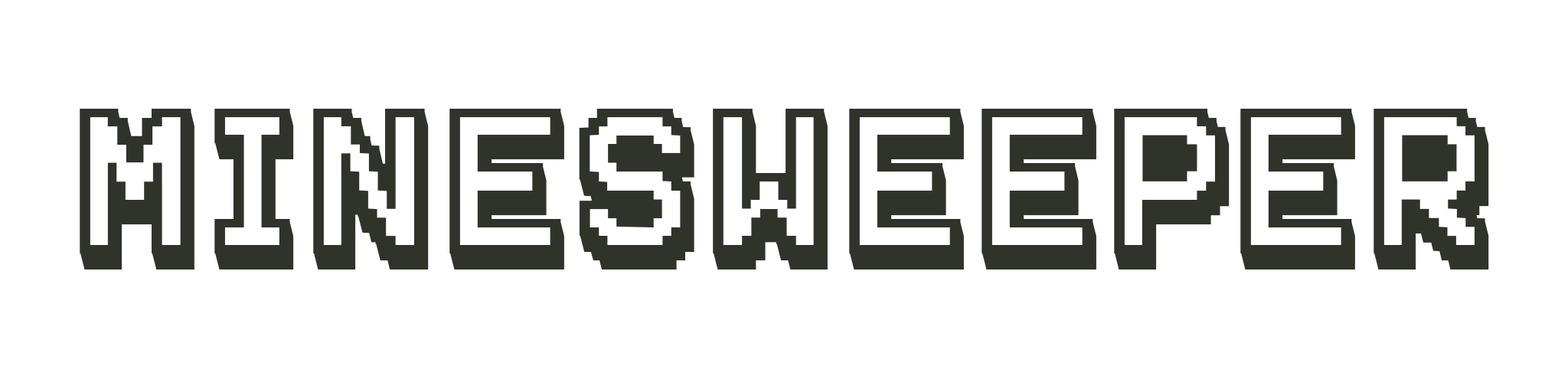
<style>
.page{position:relative;width:1568px;height:392px;background:#ffffff}
.page>*{position:absolute;margin:0}
.t1{font:168.4px "KarmaFuture";color:#303329;scale:1.23 1}
</style>
<div class="page">
<p class="t1" style="left:80px;top:109px;width:1409px;height:161px">MINESWEEPER</p>
</div>
